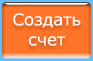
<style>
.page{position:relative;width:93px;height:61px;background:#ff7429}
.page>*{position:absolute;margin:0}
.t1{font:16.7px "Verdana";color:#ffffff}
</style>
<div class="page">
<p class="t1" style="left:13px;top:13px;width:68px;height:33px;text-align:center">Создать<br>счет</p>
</div>
